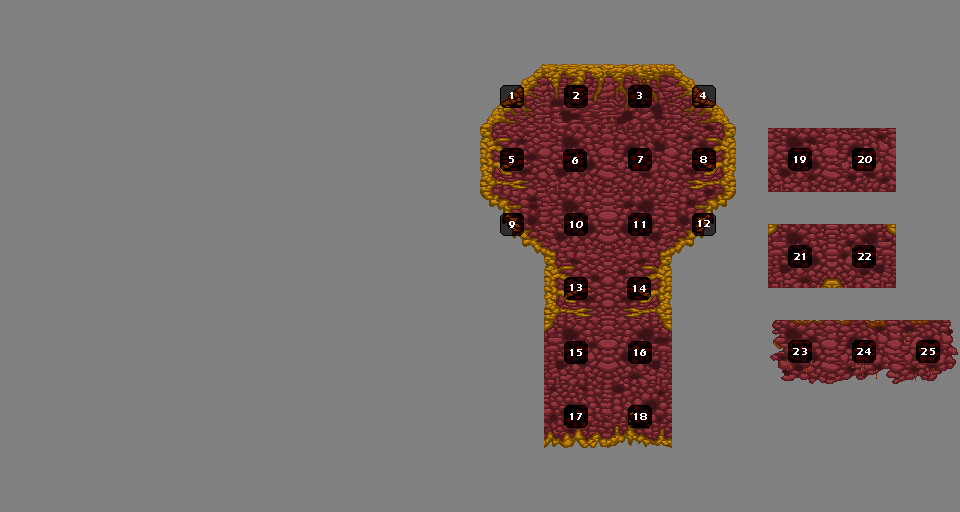
<style>
.page{position:relative;width:960px;height:512px;background:#808080}
.page>*{position:absolute;margin:0}
.t1{font:10px "ErasITC-Bold";letter-spacing:0.02em;color:#ffffff}
</style>
<div class="page">
<p class="t1" style="left:510px;top:92px;width:3px;height:7px">1</p>
<p class="t1" style="left:573px;top:92px;width:6px;height:7px">2</p>
<p class="t1" style="left:637px;top:92px;width:5px;height:7px">3</p>
<p class="t1" style="left:700px;top:92px;width:6px;height:7px">4</p>
<p class="t1" style="left:509px;top:156px;width:5px;height:7px">5</p>
<p class="t1" style="left:572px;top:157px;width:6px;height:7px">6</p>
<p class="t1" style="left:638px;top:156px;width:5px;height:7px">7</p>
<p class="t1" style="left:700px;top:156px;width:7px;height:7px">8</p>
<p class="t1" style="left:794px;top:156px;width:12px;height:7px">19</p>
<p class="t1" style="left:858px;top:156px;width:14px;height:7px">20</p>
<p class="t1" style="left:509px;top:221px;width:6px;height:7px">9</p>
<p class="t1" style="left:570px;top:221px;width:13px;height:7px">10</p>
<p class="t1" style="left:634px;top:221px;width:11px;height:7px">11</p>
<p class="t1" style="left:698px;top:220px;width:12px;height:7px">12</p>
<p class="t1" style="left:794px;top:253px;width:11px;height:7px">21</p>
<p class="t1" style="left:858px;top:253px;width:13px;height:7px">22</p>
<p class="t1" style="left:570px;top:284px;width:12px;height:7px">13</p>
<p class="t1" style="left:633px;top:285px;width:13px;height:7px">14</p>
<p class="t1" style="left:570px;top:349px;width:12px;height:7px">15</p>
<p class="t1" style="left:634px;top:349px;width:12px;height:7px">16</p>
<p class="t1" style="left:793px;top:348px;width:14px;height:7px">23</p>
<p class="t1" style="left:857px;top:348px;width:14px;height:7px">24</p>
<p class="t1" style="left:921px;top:348px;width:14px;height:7px">25</p>
<p class="t1" style="left:570px;top:413px;width:12px;height:7px">17</p>
<p class="t1" style="left:634px;top:413px;width:13px;height:7px">18</p>
</div>
